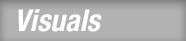
<style>
.page{position:relative;width:186px;height:41px;background:#b2b2b2}
.page>*{position:absolute;margin:0}
.t1{font:30px "HelveticaNeueLTPro-BdCnO";color:#ffffff}
</style>
<div class="page">
<p class="t1" style="left:18px;top:9px;width:84px;height:23px">Visuals</p>
</div>
